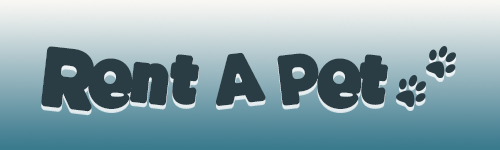
<style>
.page{position:relative;width:500px;height:150px}
.page>*{position:absolute;margin:0}
.t1{font:72px "BDCaramelVariable-Bubble";color:#2a3d45}
</style>
<div class="page">
<p class="t1" style="left:41px;top:46px;width:347px;height:66px">Rent A Pet</p>
</div>
